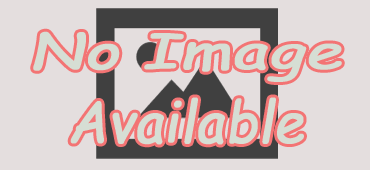
<style>
.page{position:relative;width:370px;height:170px;background:#e4dede}
.page>*{position:absolute;margin:0}
.t1{font:47.9px "ComicSansMS-Italic";color:#d6ded4;font-weight:bold;scale:1.38 1}
.t2{font:56.8px "ComicSansMS-Italic";color:#d6ded4;font-weight:bold;scale:0.94 1}
</style>
<div class="page">
<p class="t1" style="left:33px;top:31px;width:309px;height:51px">No Image</p>
<p class="t2" style="left:70px;top:97px;width:234px;height:48px">Available</p>
</div>
